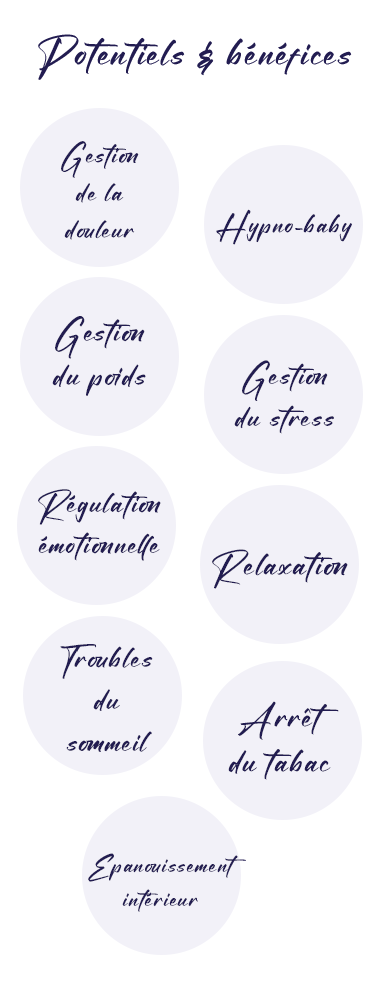
<style>
.page{position:relative;width:375px;height:999px;background:#ffffff}
.page>*{position:absolute;margin:0}
.t1{font:44.9px "Blacklist";letter-spacing:0.05em;color:#221c51}
.t2{font:31.2px/37.4px "Blacklist";letter-spacing:0.05em;color:#221c51}
.t3{font:31.6px "Blacklist";letter-spacing:0.05em;color:#221c51}
.t4{font:36.2px/43.4px "Blacklist";letter-spacing:0.05em;color:#221c51}
.t5{font:34.5px/41.4px "Blacklist";letter-spacing:0.05em;color:#221c51}
.t6{font:34.7px/41.6px "Blacklist";letter-spacing:0.05em;color:#221c51}
.t7{font:38px "Blacklist";letter-spacing:0.05em;color:#221c51}
.t8{font:35.2px/42.2px "Blacklist";letter-spacing:0.05em;color:#221c51}
.t9{font:38.1px/45.7px "Blacklist";letter-spacing:0.05em;color:#221c51}
.t10{font:27.8px/33.4px "Blacklist";letter-spacing:0.05em;color:#221c51}
</style>
<div class="page">
<p class="t1" style="left:38px;top:34px;width:314px;height:46px">Potentiels &amp; bénéfices</p>
<p class="t2" style="left:61px;top:141px;width:78px;height:99px;text-align:center">Gestion<br>de la<br>douleur</p>
<p class="t3" style="left:216px;top:209px;width:136px;height:36px">Hypno-baby</p>
<p class="t4" style="left:52px;top:316px;width:94px;height:80px;text-align:center">Gestion<br>du poids</p>
<p class="t5" style="left:234px;top:360px;width:100px;height:74px;text-align:center">Gestion<br>du stress</p>
<p class="t6" style="left:38px;top:489px;width:123px;height:72px;text-align:center">Régulation<br>émotionnelle</p>
<p class="t7" style="left:212px;top:549px;width:136px;height:40px">Relaxation</p>
<p class="t8" style="left:60px;top:644px;width:93px;height:108px;text-align:center">Troubles <br>du<br>sommeil</p>
<p class="t9" style="left:228px;top:701px;width:111px;height:79px;text-align:center">Arrêt<br>du tabac</p>
<p class="t10" style="left:88px;top:853px;width:158px;height:59px;text-align:center">Epanouissement<br>intérieur</p>
</div>
